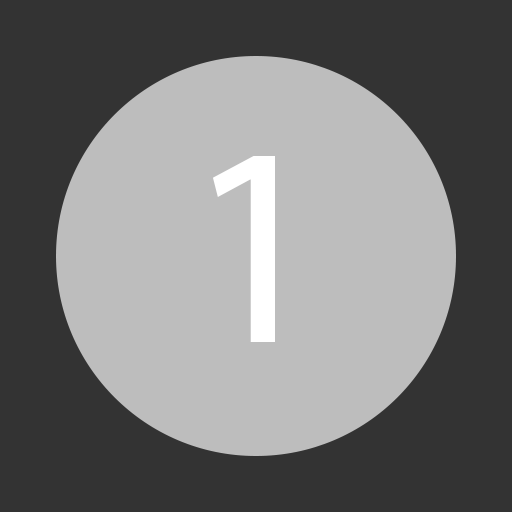
<style>
.page{position:relative;width:512px;height:512px;background:#333333}
.page>*{position:absolute;margin:0}
.t1{font:286px "MyriadPro-Regular";color:#ffffff}
</style>
<div class="page">
<p class="t1" style="left:213px;top:156px;width:62px;height:186px">1</p>
</div>
